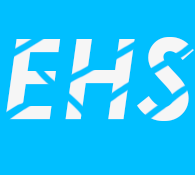
<style>
.page{position:relative;width:195px;height:175px;background:#00bfff}
.page>*{position:absolute;margin:0}
.t1{font:112px "CenturyGothic-BoldItalic";color:#f6f6f6}
</style>
<div class="page">
<p class="t1" style="left:5px;top:37px;width:189px;height:84px">EHS</p>
</div>
